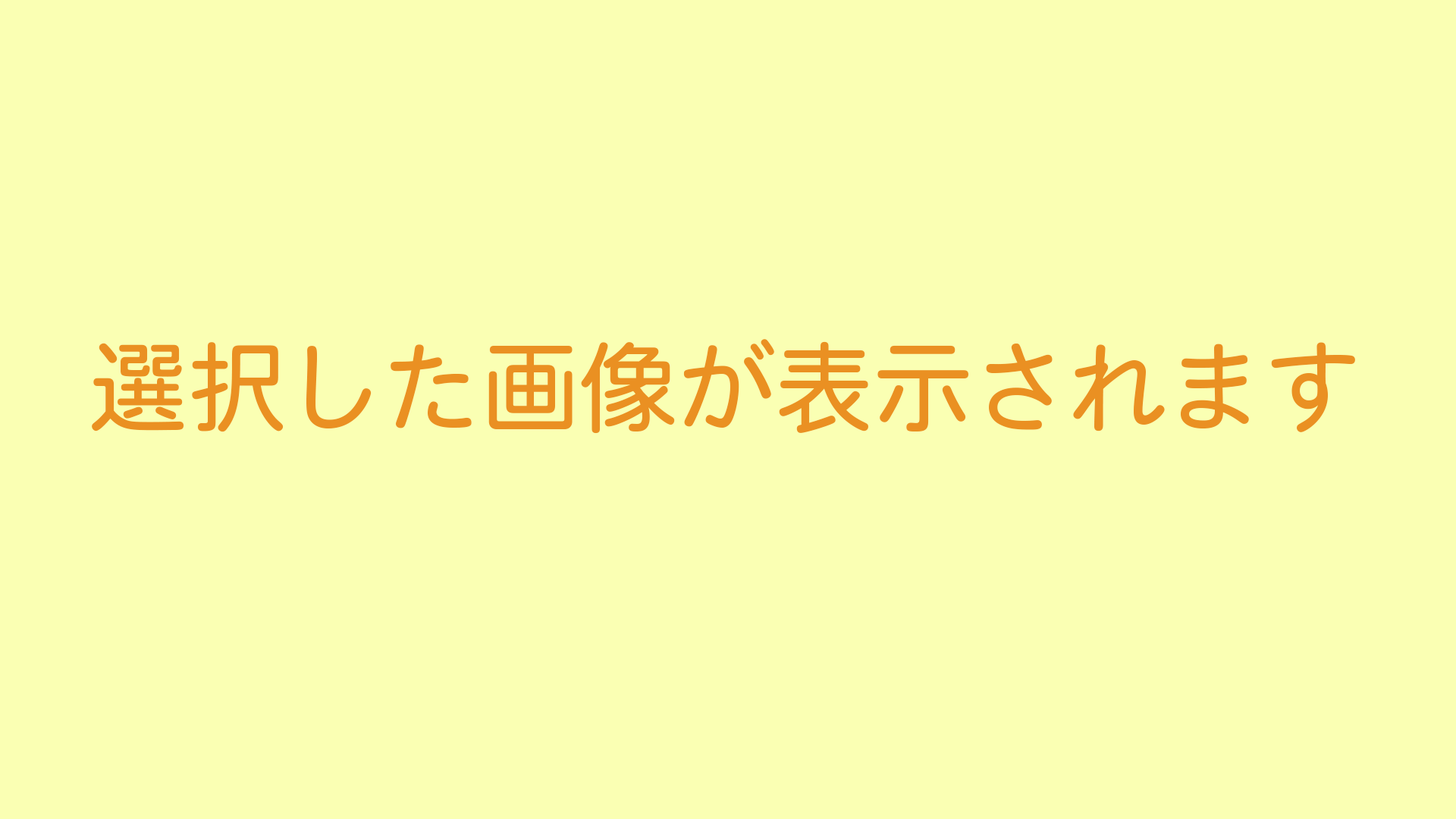
<style>
.page{position:relative;width:1456px;height:819px;background:#faffb3}
.page>*{position:absolute;margin:0}
.t1{font:98px "HeiseiMaruGoStd-W4";color:#ea9022}
</style>
<div class="page">
<p class="t1" style="left:92px;top:339px;width:1263px;height:95px">選択した画像が表示されます</p>
</div>
